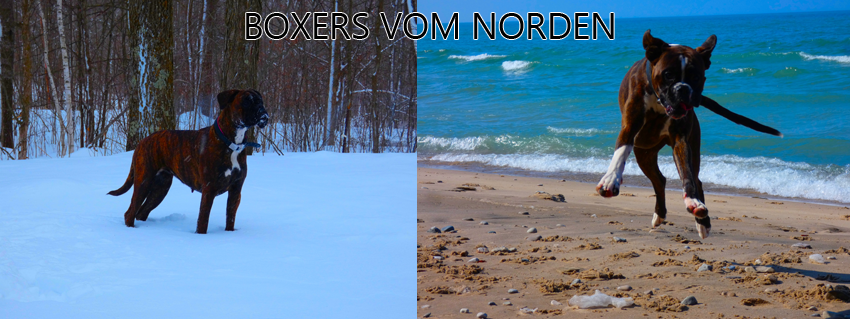
<style>
.page{position:relative;width:850px;height:319px}
.page>*{position:absolute;margin:0}
.t1{font:36px "SegoeUISymbol";color:#000000}
</style>
<div class="page">
<p class="t1" style="left:246px;top:13px;width:368px;height:26px">BOXERS VOM NORDEN</p>
</div>
